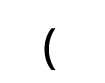
<style>
.page{position:relative;width:105px;height:83px;background:#ffffff}
.page>*{position:absolute;margin:0}
.t1{font:47.9px "DroidSans";color:#000000}
</style>
<div class="page">
<p class="t1" style="left:44px;top:28px;width:12px;height:42px">(</p>
</div>
